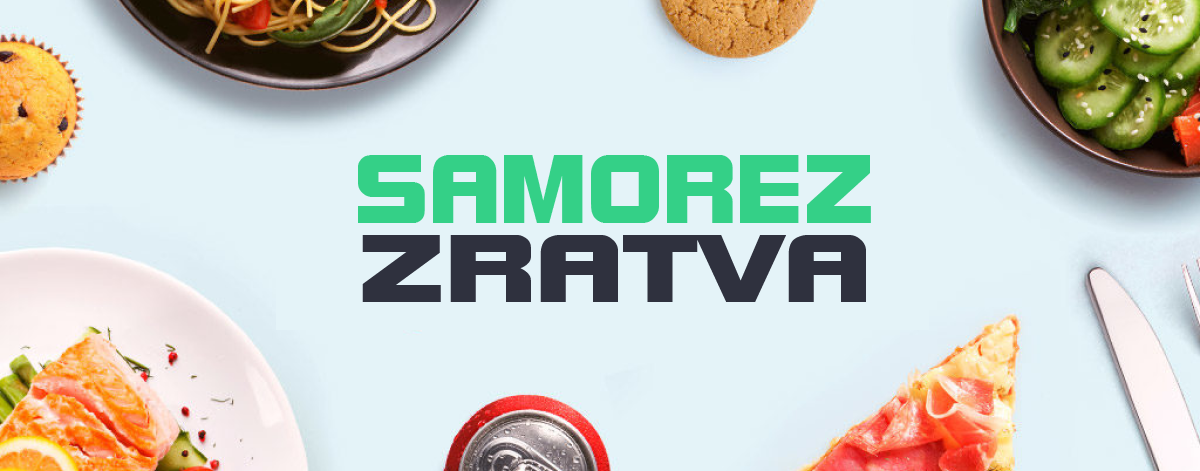
<style>
.page{position:relative;width:1200px;height:471px;background:#e4f3f8}
.page>*{position:absolute;margin:0}
.t1{font:93.8px "Bolt-Regular";color:#34d087}
.t2{font:93.8px "Bolt-Regular";color:#2f313e;scale:1.22 1}
</style>
<div class="page">
<p class="t1" style="left:358px;top:155px;width:513px;height:68px">SAMOREZ</p>
<p class="t2" style="left:362px;top:235px;width:504px;height:67px">ZRATVA</p>
</div>
